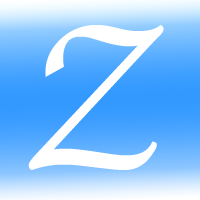
<style>
.page{position:relative;width:200px;height:200px}
.page>*{position:absolute;margin:0}
.t1{font:208.5px "Apple-Chancery";color:#ffffff;scale:1.12 1}
</style>
<div class="page">
<p class="t1" style="left:28px;top:25px;width:136px;height:145px">Z</p>
</div>
